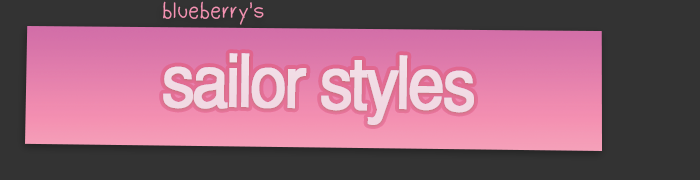
<style>
.page{position:relative;width:700px;height:180px;background:#333333}
.page>*{position:absolute;margin:0}
.t1{font:24px "Dudu_Calligraphy";color:#f693b3}
.t2{font:72px "Helvetica-Normal";letter-spacing:-0.06em;color:#f5e9ee;font-weight:bold;scale:0.9 1}
</style>
<div class="page">
<p class="t1" style="left:163px;top:1px;width:101px;height:24px">blueberry's</p>
<p class="t2" style="left:163px;top:53px;width:311px;height:72px;rotate:1deg">sailor styles</p>
<p class="t2" style="left:163px;top:53px;width:311px;height:72px;rotate:1deg">sailor styles</p>
</div>
